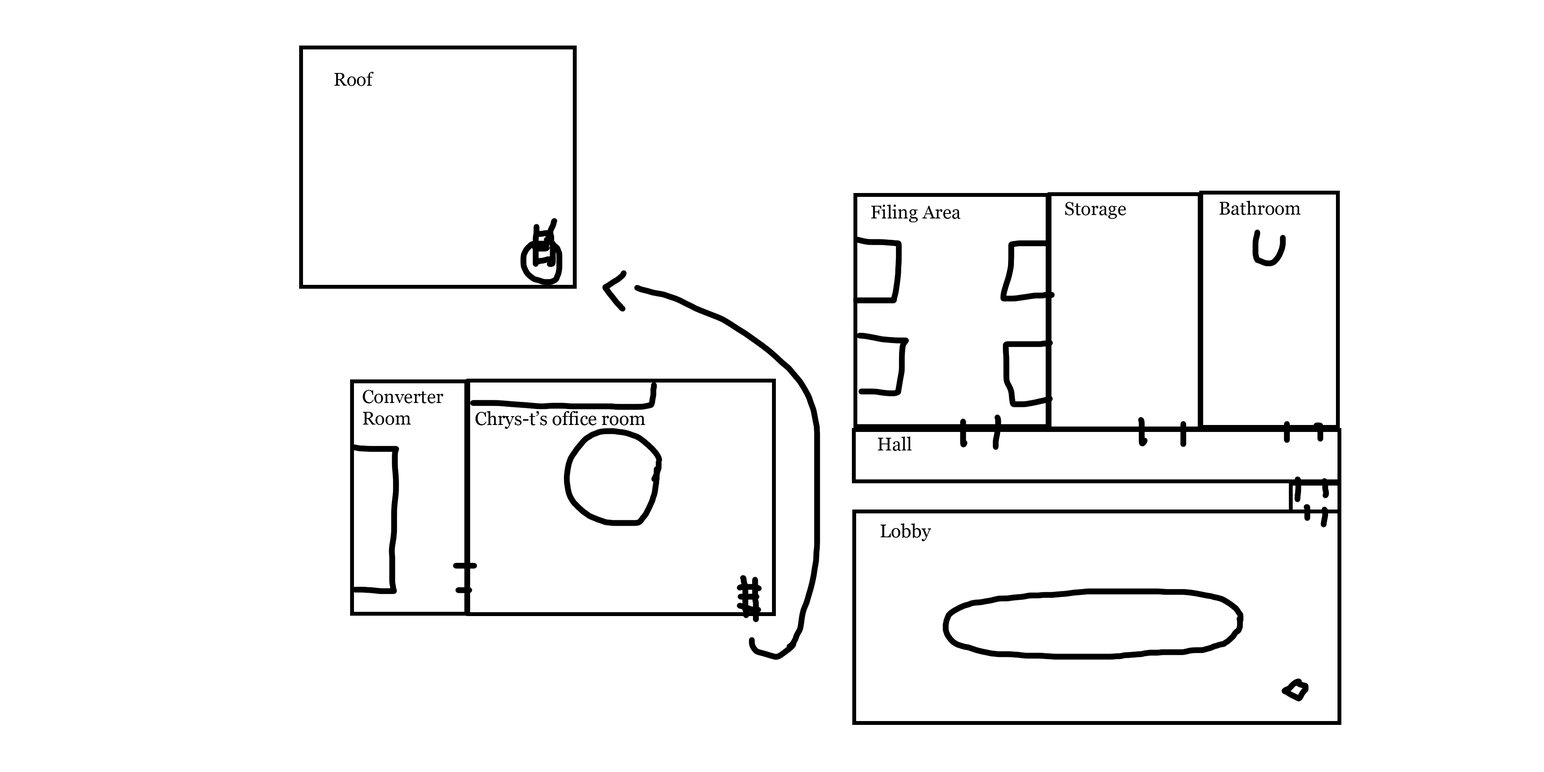
<style>
.page{position:relative;width:1544px;height:772px;background:#ffffff}
.page>*{position:absolute;margin:0}
.t1{font:18.5px "Georgia";color:#000000}
.t2{font:18.5px/5.4px "Georgia";color:#000000}
</style>
<div class="page">
<p class="t1" style="left:334px;top:72px;width:40px;height:14px">Roof</p>
<p class="t1" style="left:871px;top:205px;width:90px;height:17px">Filing Area</p>
<p class="t1" style="left:1065px;top:202px;width:62px;height:17px">Storage</p>
<p class="t1" style="left:1220px;top:201px;width:81px;height:14px">Bathroom</p>
<p class="t2" style="left:363px;top:390px;width:81px;height:35px">Converter<br><br><br><br>Room</p>
<p class="t1" style="left:878px;top:437px;width:34px;height:14px">Hall</p>
</div>
